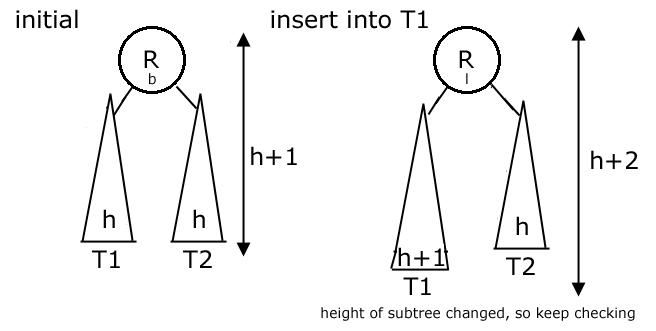
<style>
.page{position:relative;width:656px;height:331px;background:#ffffff}
.page>*{position:absolute;margin:0}
.t1{font:24px "Verdana";color:#000000}
.t2{font:14px "Verdana";color:#000000}
</style>
<div class="page">
<p class="t1" style="left:16px;top:9px;width:62px;height:20px">initial</p>
<p class="t1" style="left:271px;top:10px;width:157px;height:19px">insert into T1</p>
<p class="t2" style="left:321px;top:307px;width:314px;height:14px">height of subtree changed, so keep checking</p>
</div>
